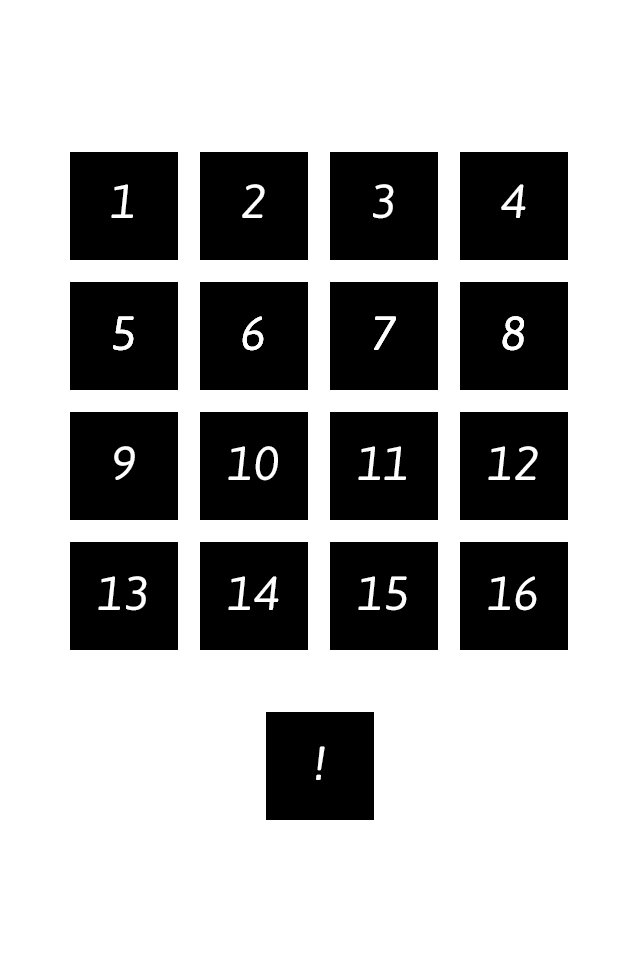
<style>
.page{position:relative;width:640px;height:960px;background:#ffffff}
.page>*{position:absolute;margin:0}
.t1{font:48px "Asap-Italic";color:#ffffff}
</style>
<div class="page">
<p class="t1" style="left:111px;top:184px;width:22px;height:34px">1</p>
<p class="t1" style="left:242px;top:184px;width:23px;height:34px">2</p>
<p class="t1" style="left:373px;top:184px;width:21px;height:35px">3</p>
<p class="t1" style="left:501px;top:184px;width:25px;height:34px">4</p>
<p class="t1" style="left:113px;top:316px;width:21px;height:35px">5</p>
<p class="t1" style="left:113px;top:316px;width:21px;height:35px">5</p>
<p class="t1" style="left:242px;top:316px;width:22px;height:35px">6</p>
<p class="t1" style="left:242px;top:316px;width:22px;height:35px">6</p>
<p class="t1" style="left:374px;top:316px;width:22px;height:34px">7</p>
<p class="t1" style="left:374px;top:316px;width:22px;height:34px">7</p>
<p class="t1" style="left:502px;top:316px;width:22px;height:35px">8</p>
<p class="t1" style="left:502px;top:316px;width:22px;height:35px">8</p>
<p class="t1" style="left:114px;top:446px;width:21px;height:34px">9</p>
<p class="t1" style="left:228px;top:446px;width:50px;height:35px">10</p>
<p class="t1" style="left:358px;top:446px;width:48px;height:34px">11</p>
<p class="t1" style="left:488px;top:446px;width:50px;height:34px">12</p>
<p class="t1" style="left:98px;top:576px;width:49px;height:35px">13</p>
<p class="t1" style="left:228px;top:576px;width:51px;height:34px">14</p>
<p class="t1" style="left:358px;top:576px;width:49px;height:35px">15</p>
<p class="t1" style="left:488px;top:576px;width:49px;height:35px">16</p>
<p class="t1" style="left:316px;top:746px;width:9px;height:34px">!</p>
</div>
